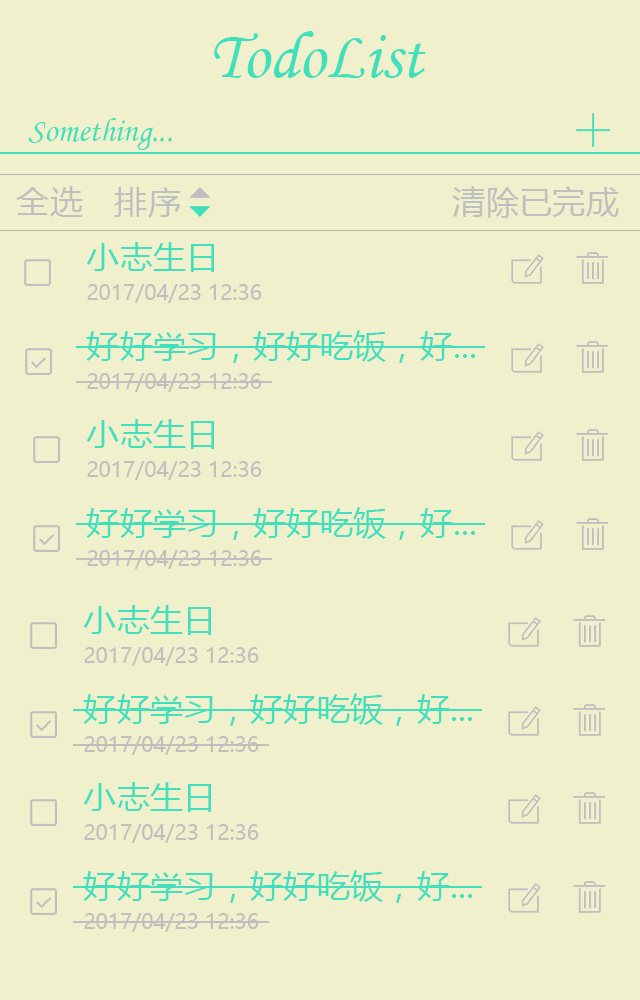
<style>
.page{position:relative;width:640px;height:1000px;background:#f0f0cd}
.page>*{position:absolute;margin:0}
.t1{font:66.7px "MonotypeCorsiva";color:#42dfbc}
.t2{font:33.3px "STLiti";color:#42dfbc}
.t3{font:33.3px "MicrosoftYaHeiUI";color:#bfbfbf}
.t4{font:33.3px "MicrosoftYaHeiUI";color:#42dfbc}
.t5{font:20.8px "MicrosoftYaHeiUI";color:#bfbfbf}
</style>
<div class="page">
<p class="t1" style="left:214px;top:31px;width:212px;height:47px">TodoList</p>
<p class="t2" style="left:28px;top:118px;width:144px;height:32px">Something...</p>
<p class="t3" style="left:16px;top:186px;width:67px;height:31px">全选</p>
<p class="t3" style="left:114px;top:187px;width:67px;height:31px">排序</p>
<p class="t3" style="left:452px;top:186px;width:167px;height:32px">清除已完成</p>
<p class="t4" style="left:86px;top:242px;width:128px;height:30px">小志生日</p>
<p class="t5" style="left:87px;top:284px;width:175px;height:19px">2017/04/23 12:36</p>
<p class="t4" style="left:86px;top:330px;width:390px;height:33px">好好学习，好好吃饭，好...</p>
<p class="t5" style="left:87px;top:373px;width:175px;height:19px">2017/04/23 12:36</p>
<p class="t4" style="left:86px;top:419px;width:128px;height:30px">小志生日</p>
<p class="t5" style="left:87px;top:461px;width:175px;height:19px">2017/04/23 12:36</p>
<p class="t4" style="left:86px;top:507px;width:390px;height:33px">好好学习，好好吃饭，好...</p>
<p class="t5" style="left:87px;top:550px;width:175px;height:19px">2017/04/23 12:36</p>
<p class="t4" style="left:83px;top:605px;width:128px;height:30px">小志生日</p>
<p class="t5" style="left:84px;top:647px;width:175px;height:19px">2017/04/23 12:36</p>
<p class="t4" style="left:83px;top:693px;width:390px;height:33px">好好学习，好好吃饭，好...</p>
<p class="t5" style="left:84px;top:736px;width:175px;height:19px">2017/04/23 12:36</p>
<p class="t4" style="left:83px;top:782px;width:128px;height:30px">小志生日</p>
<p class="t5" style="left:84px;top:824px;width:175px;height:19px">2017/04/23 12:36</p>
<p class="t4" style="left:83px;top:870px;width:390px;height:33px">好好学习，好好吃饭，好...</p>
<p class="t5" style="left:84px;top:913px;width:175px;height:19px">2017/04/23 12:36</p>
</div>
